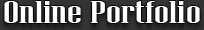
<style>
.page{position:relative;width:204px;height:30px;background:#ffffff}
.page>*{position:absolute;margin:0}
.t1{font:32px "NiagaraSolid-Reg";color:#ffffff;scale:1.7 1}
</style>
<div class="page">
<p class="t1" style="left:4px;top:1px;width:196px;height:22px">Online Portfolio</p>
</div>
